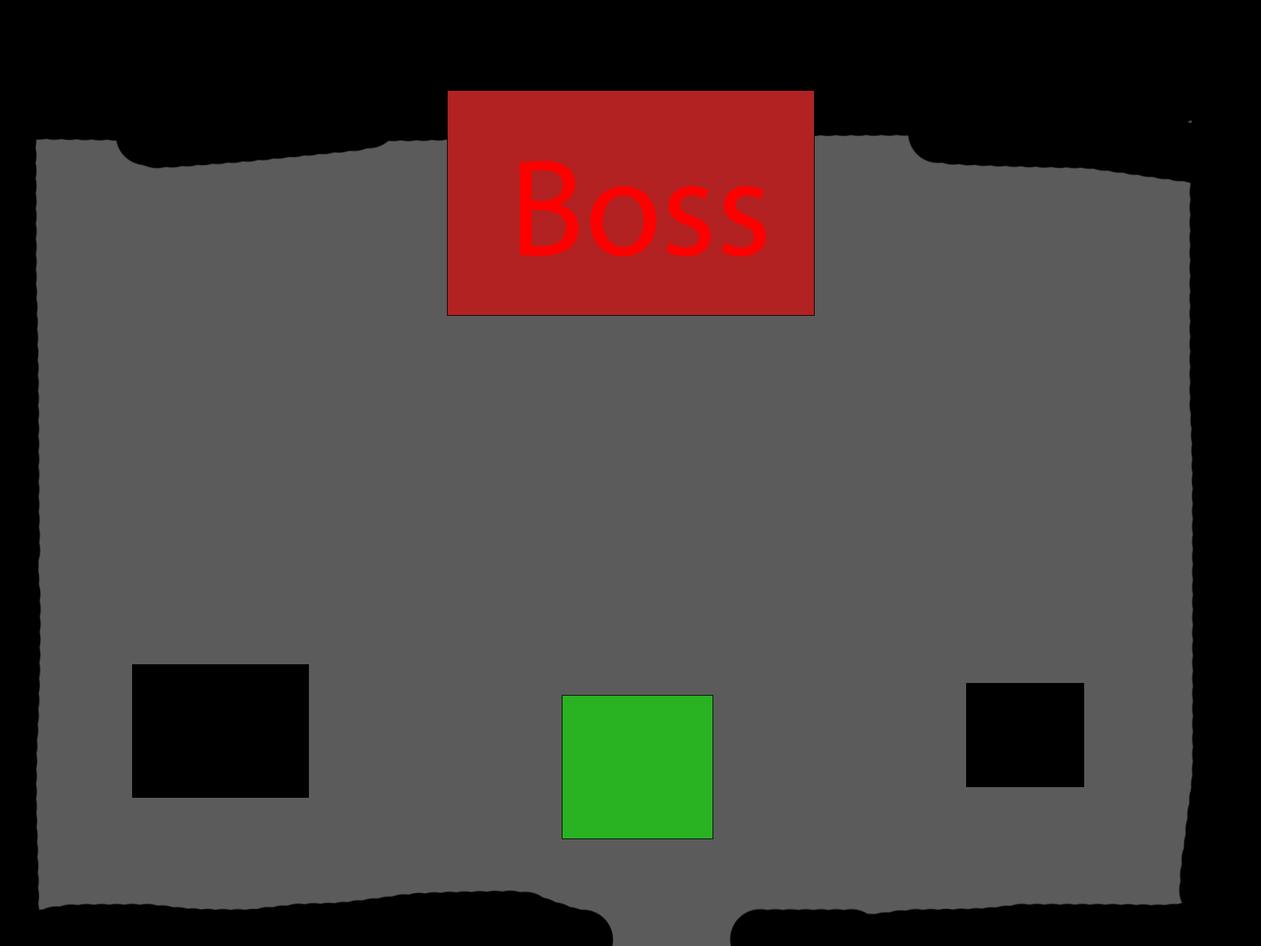
<style>
.page{position:relative;width:1261px;height:946px;background:#5b5b5b}
.page>*{position:absolute;margin:0}
.t1{font:139px "MyriadPro-Regular";color:#ff0000}
</style>
<div class="page">
<p class="t1" style="left:520px;top:160px;width:246px;height:96px">Boss</p>
</div>
